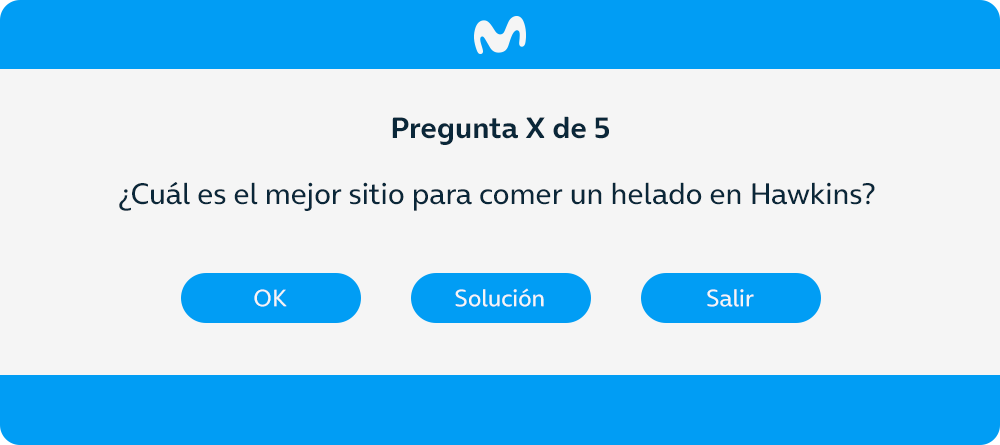
<style>
.page{position:relative;width:1000px;height:445px;background:#f5f5f5}
.page>*{position:absolute;margin:0}
.t1{font:30px "OnAir-Bold";color:#0a2739}
.t2{font:30px "OnAir-Regular";color:#0a2739}
.t3{font:24px "OnAir-Regular";color:#f5f5f5}
</style>
<div class="page">
<p class="t1" style="left:392px;top:116px;width:217px;height:29px">Pregunta X de 5</p>
<p class="t2" style="left:119px;top:182px;width:756px;height:29px">¿Cuál es el mejor sitio para comer un helado en Hawkins?</p>
<p class="t3" style="left:254px;top:289px;width:33px;height:18px">OK</p>
<p class="t3" style="left:455px;top:288px;width:89px;height:19px">Solución</p>
<p class="t3" style="left:707px;top:289px;width:47px;height:18px">Salir</p>
</div>
